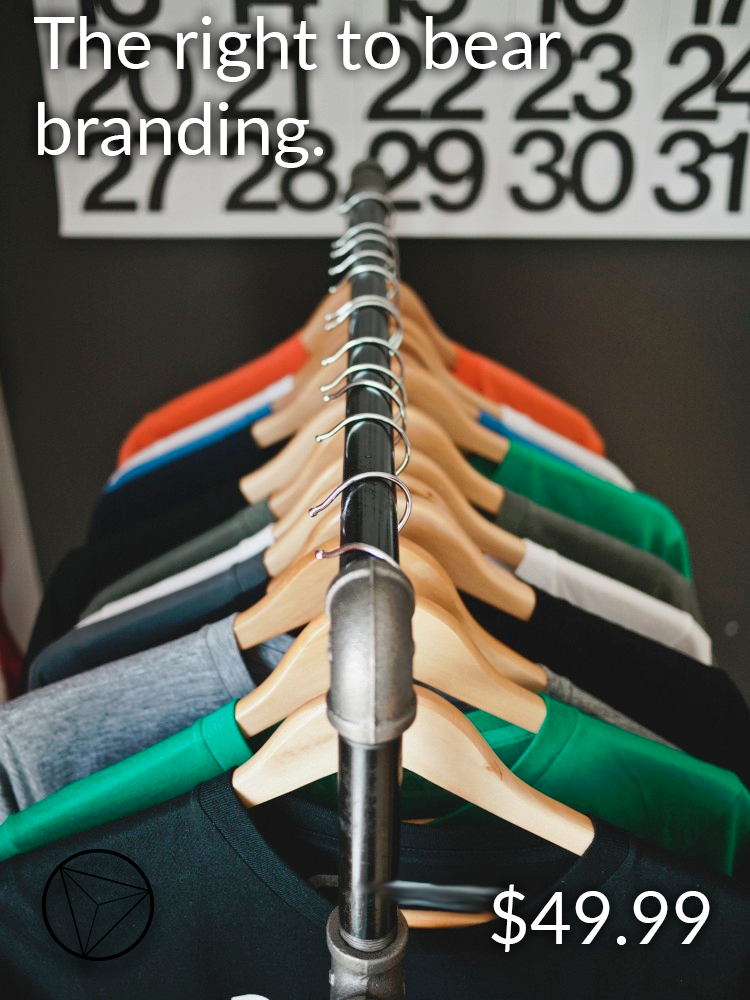
<style>
.page{position:relative;width:750px;height:1000px}
.page>*{position:absolute;margin:0}
.t1{font:72px "Lato-Regular";color:#ffffff}
</style>
<div class="page">
<p class="t1" style="left:34px;top:16px;width:527px;height:152px">The right to bear<br>branding.</p>
<p class="t1" style="left:491px;top:884px;width:219px;height:68px">$49.99</p>
</div>
